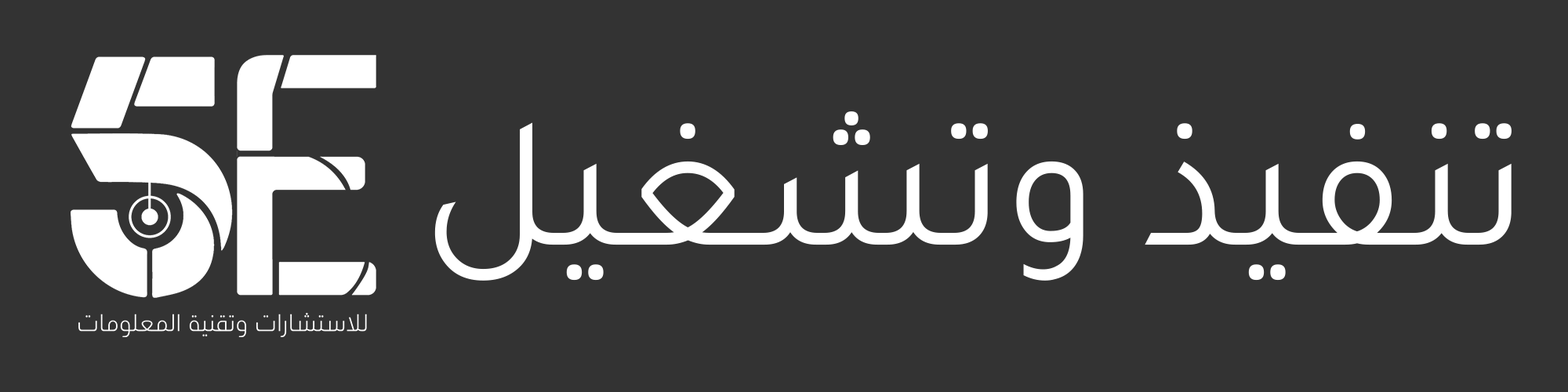
<style>
.page{position:relative;width:1568px;height:392px;background:#333333}
.page>*{position:absolute;margin:0}
.t1{font:188.9px "Tajawal-Regular";color:#ffffff}
</style>
<div class="page">
<p class="t1" style="left:434px;top:111px;width:1078px;height:170px">تنفيذ وتشغيل</p>
</div>
